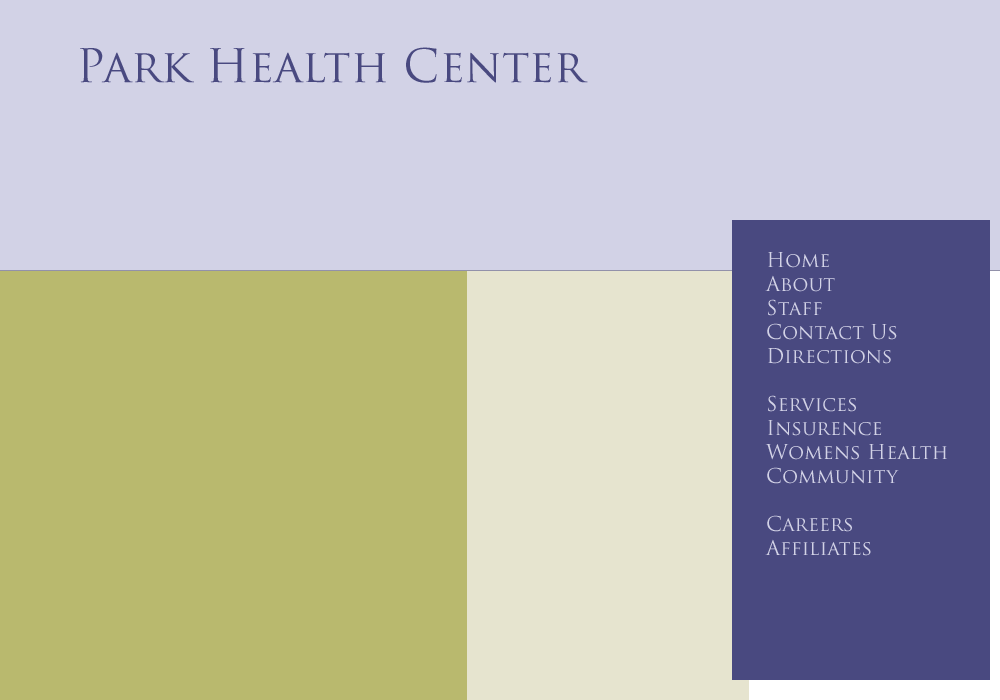
<style>
.page{position:relative;width:1000px;height:700px;background:#d2d2e6}
.page>*{position:absolute;margin:0}
.t1{font:45px "TrajanPro-Regular";color:#494980}
.t2{font:20px "TrajanPro-Regular";color:#d2d2e6}
</style>
<div class="page">
<p class="t1" style="left:80px;top:47px;width:508px;height:36px">Park Health Center</p>
<p class="t2" style="left:765px;top:252px;width:182px;height:304px">Home<br>About<br>Staff<br>Contact Us<br>Directions<br><br>Services<br>Insurence<br>Womens Health<br>Community<br><br>Careers<br>Affiliates</p>
</div>
